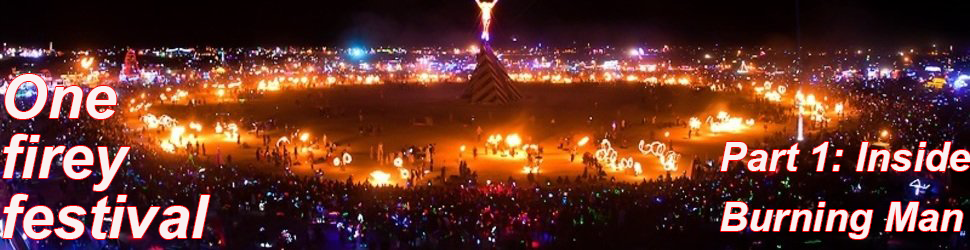
<style>
.page{position:relative;width:970px;height:250px}
.page>*{position:absolute;margin:0}
.t1{font:60px/60px "Arial-BoldItalicMT";color:#f9f1f1}
.t2{font:40px/60px "Arial-BoldItalicMT";color:#f8f1f1}
</style>
<div class="page">
<p class="t1" style="left:3px;top:74px;width:207px;height:165px">One <br>firey <br>festival</p>
<p class="t2" style="left:720px;top:142px;width:251px;height:97px">Part 1: Inside Burning Man</p>
</div>
